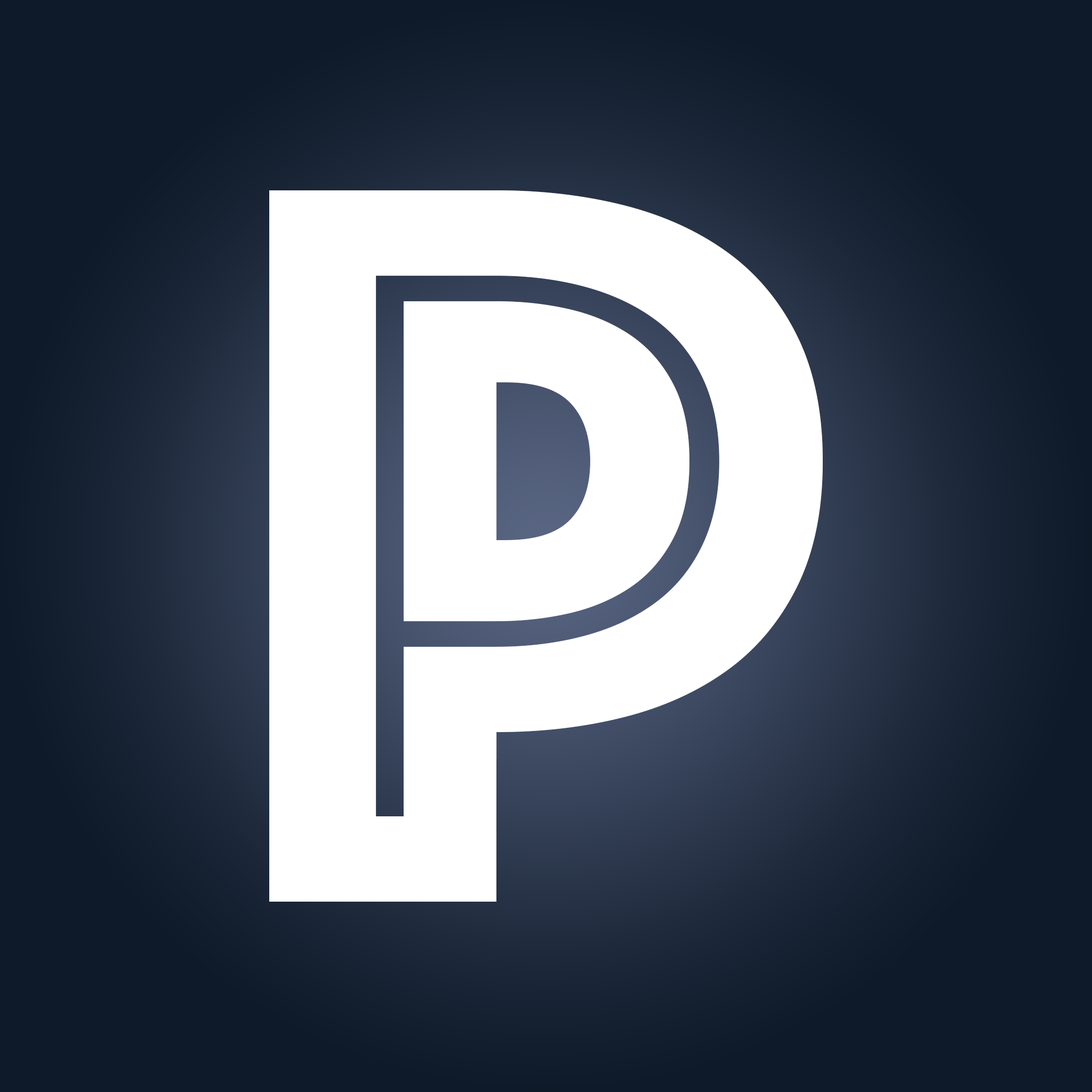
<style>
.page{position:relative;width:1092px;height:1092px;background:#0e1a29}
.page>*{position:absolute;margin:0}
.t1{font:1066.4px "Phosphate-Inline";color:#ffffff}
</style>
<div class="page">
<p class="t1" style="left:269px;top:190px;width:554px;height:712px">p</p>
</div>
